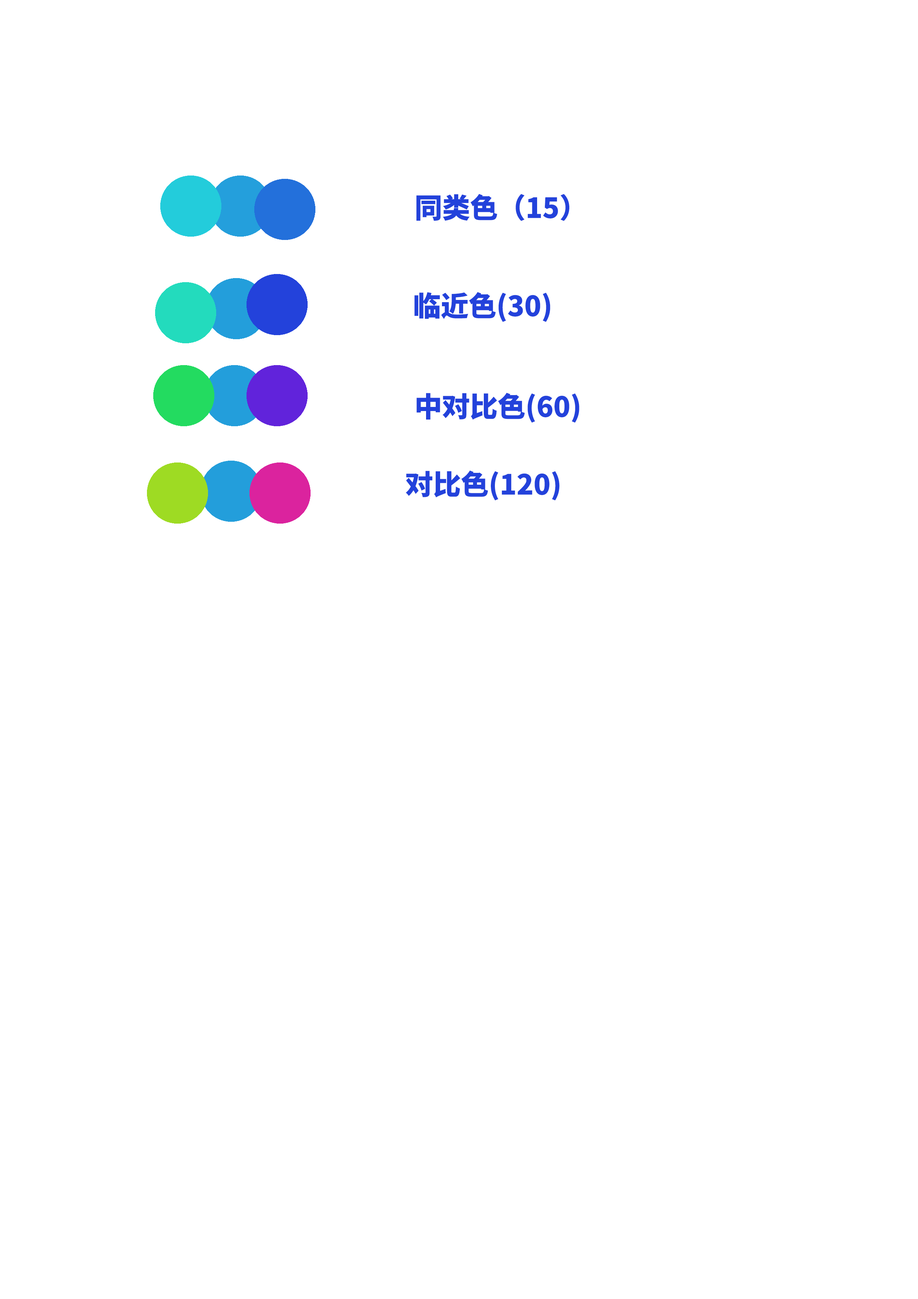
<style>
.page{position:relative;width:918px;height:1299px;background:#ffffff}
.page>*{position:absolute;margin:0}
.t1{font:27.8px "SourceHanSansSC-Heavy";color:#2342db;text-transform:uppercase}
</style>
<div class="page">
<p class="t1" style="left:416px;top:194px;width:153px;height:27px">同类色（15）</p>
<p class="t1" style="left:414px;top:292px;width:137px;height:30px">临近色(30)</p>
<p class="t1" style="left:416px;top:392px;width:163px;height:31px">中对比色(60)</p>
<p class="t1" style="left:406px;top:470px;width:154px;height:31px">对比色(120)</p>
</div>
